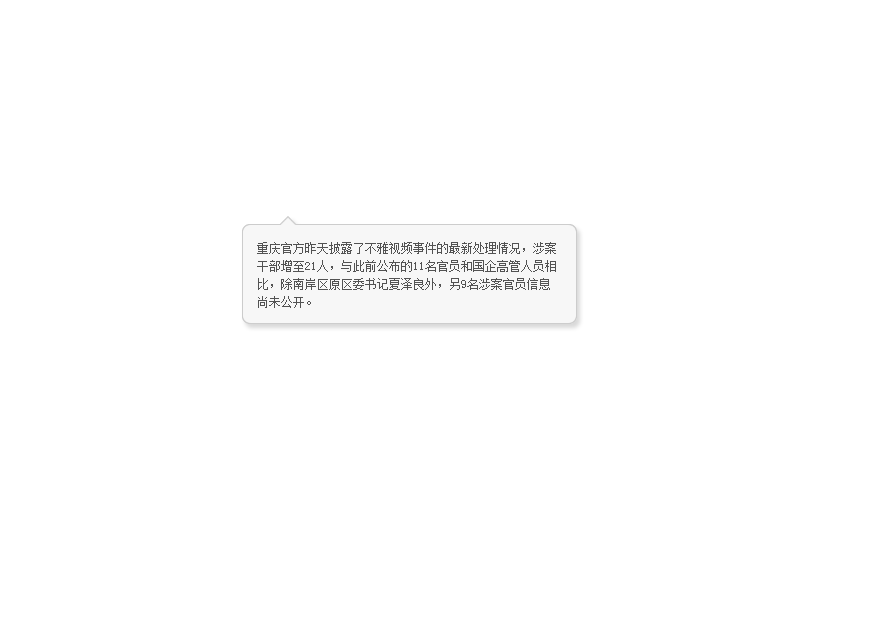
<style>
.page{position:relative;width:885px;height:622px;background:#ffffff}
.page>*{position:absolute;margin:0}
.t1{font:12px/18px "SimSun";color:#525252}
</style>
<div class="page">
<p class="t1" style="left:257px;top:242px;width:299px;height:66px">重庆官方昨天披露了不雅视频事件的最新处理情况，涉案干部增至21人，与此前公布的11名官员和国企高管人员相比，除南岸区原区委书记夏泽良外，另9名涉案官员信息尚未公开。</p>
</div>
